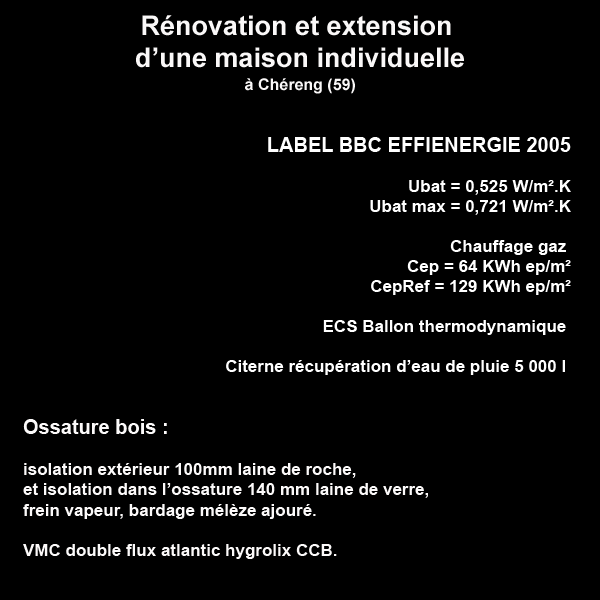
<style>
.page{position:relative;width:600px;height:600px;background:#000000}
.page>*{position:absolute;margin:0}
.t1{font:27px "Arial-BoldMT";color:#faf8f8}
.t2{font:16px/22.7px "Arial-BoldMT";color:#f9f9f9}
.t3{font:17px/20px "Arial-BoldMT";color:#ffffff}
.t4{font:20px/20px "Arial-BoldMT";color:#ffffff}
.t5{font:17px "Arial-BoldMT";color:#fcfafa}
.t6{font:20px "Arial-BoldMT";color:#fcfafa}
</style>
<div class="page">
<p class="t1" style="left:136px;top:15px;width:328px;height:79px;text-align:center">Rénovation et extension <br>d’une maison individuelle<br><span class="t2">à Chéreng (59)</span></p>
<p class="t3" style="left:226px;top:137px;width:345px;height:238px;text-align:right"><span class="t4">LABEL BBC EFFIENERGIE 2005<br><br></span>Ubat = 0,525 W/m².K<br>Ubat max = 0,721 W/m².K<br><br>Chauffage gaz <br>Cep = 64 KWh ep/m²<br>CepRef = 129 KWh ep/m²<br><br>ECS Ballon thermodynamique <br><br>Citerne récupération d’eau de pluie 5 000 l</p>
<p class="t5" style="left:23px;top:419px;width:405px;height:140px"><span class="t6">Ossature bois :<br></span><br>isolation extérieur 100mm laine de roche, <br>et isolation dans l’ossature 140 mm laine de verre, <br>frein vapeur, bardage mélèze ajouré.<br><br>VMC double flux atlantic hygrolix CCB.</p>
</div>
